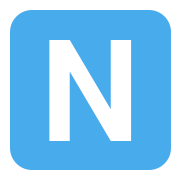
<style>
.page{position:relative;width:180px;height:180px;background:#47abec}
.page>*{position:absolute;margin:0}
.t1{font:142px "Roboto-Bold";color:#ffffff;text-transform:uppercase}
</style>
<div class="page">
<p class="t1" style="left:49px;top:40px;width:83px;height:101px">N</p>
</div>
